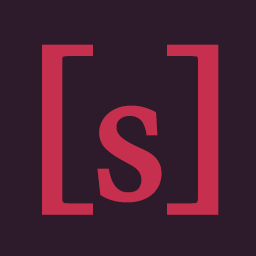
<style>
.page{position:relative;width:256px;height:256px;background:#2d1b2b}
.page>*{position:absolute;margin:0}
.t1{font:191.1px "NanumMyeongjoExtraBold";color:#c62f4e}
</style>
<div class="page">
<p class="t1" style="left:42px;top:44px;width:177px;height:171px">[s]</p>
</div>
